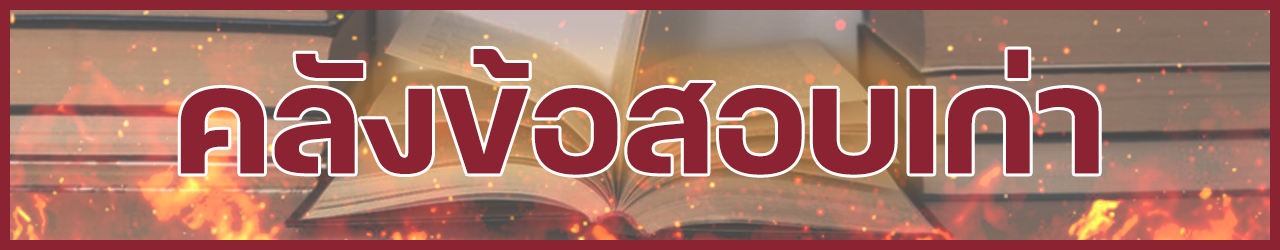
<style>
.page{position:relative;width:1280px;height:250px;background:#8b2332}
.page>*{position:absolute;margin:0}
.t1{font:200px "FCMinimalBold";color:#8b2332}
</style>
<div class="page">
<p class="t1" style="left:180px;top:49px;width:919px;height:126px">คลังข้อสอบเก่า</p>
</div>
